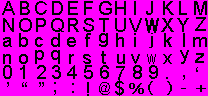
<style>
.page{position:relative;width:208px;height:96px;background:#ff00ff}
.page>*{position:absolute;margin:0}
.t1{font:18.7px "ArialMT";color:#000000}
.t2{font:18.7px "ArialMT";color:#000000;font-weight:bold;scale:0.75 1}
.t3{font:16.4px "ArialMT";color:#000000;scale:1.14 1}
.t4{font:18.7px "ArialMT";color:#000000;scale:0.75 1}
.t5{font:14px "ArialMT";color:#000000;scale:0.84 1}
.t6{font:14.9px "ArialMT";color:#000000;scale:1.25 1}
.t7{font:14.6px "ArialMT";color:#000000;scale:1.28 1}
</style>
<div class="page">
<p class="t1" style="left:2px;top:1px;width:13px;height:14px">A</p>
<p class="t1" style="left:20px;top:1px;width:10px;height:14px">B</p>
<p class="t1" style="left:35px;top:1px;width:12px;height:14px">C</p>
<p class="t1" style="left:52px;top:1px;width:11px;height:14px">D</p>
<p class="t1" style="left:68px;top:1px;width:10px;height:14px">E</p>
<p class="t1" style="left:84px;top:1px;width:9px;height:14px">F</p>
<p class="t1" style="left:99px;top:1px;width:13px;height:14px">G</p>
<p class="t1" style="left:115px;top:1px;width:11px;height:14px">H</p>
<p class="t1" style="left:146px;top:1px;width:7px;height:14px">J</p>
<p class="t1" style="left:163px;top:1px;width:11px;height:14px">K</p>
<p class="t1" style="left:179px;top:1px;width:8px;height:14px">L</p>
<p class="t1" style="left:194px;top:1px;width:13px;height:14px">M</p>
<p class="t1" style="left:195px;top:17px;width:11px;height:14px">Z</p>
<p class="t1" style="left:3px;top:18px;width:11px;height:14px">N</p>
<p class="t1" style="left:19px;top:18px;width:13px;height:14px">O</p>
<p class="t1" style="left:36px;top:18px;width:10px;height:14px">P</p>
<p class="t1" style="left:51px;top:18px;width:13px;height:14px">Q</p>
<p class="t1" style="left:68px;top:18px;width:11px;height:14px">R</p>
<p class="t1" style="left:83px;top:18px;width:11px;height:14px">S</p>
<p class="t1" style="left:99px;top:18px;width:10px;height:14px">T</p>
<p class="t1" style="left:115px;top:18px;width:11px;height:14px">U</p>
<p class="t1" style="left:129px;top:18px;width:13px;height:14px">V</p>
<p class="t2" style="left:145px;top:18px;width:14px;height:15px">W</p>
<p class="t1" style="left:161px;top:18px;width:13px;height:14px">X</p>
<p class="t1" style="left:177px;top:18px;width:12px;height:14px">Y</p>
<p class="t1" style="left:3px;top:37px;width:9px;height:10px">a</p>
<p class="t1" style="left:19px;top:33px;width:9px;height:14px">b</p>
<p class="t1" style="left:35px;top:37px;width:8px;height:10px">c</p>
<p class="t1" style="left:51px;top:33px;width:9px;height:14px">d</p>
<p class="t1" style="left:67px;top:37px;width:9px;height:10px">e</p>
<p class="t1" style="left:85px;top:33px;width:6px;height:14px">f</p>
<p class="t1" style="left:99px;top:33px;width:9px;height:14px">g</p>
<p class="t1" style="left:116px;top:33px;width:8px;height:14px">h</p>
<p class="t1" style="left:134px;top:33px;width:2px;height:14px">i</p>
<p class="t3" style="left:149px;top:33px;width:4px;height:15px">j</p>
<p class="t1" style="left:164px;top:33px;width:8px;height:14px">k</p>
<p class="t1" style="left:193px;top:37px;width:14px;height:10px">m</p>
<p class="t1" style="left:3px;top:54px;width:8px;height:10px">n</p>
<p class="t1" style="left:19px;top:54px;width:9px;height:10px">o</p>
<p class="t1" style="left:35px;top:50px;width:9px;height:14px">p</p>
<p class="t1" style="left:51px;top:50px;width:9px;height:14px">q</p>
<p class="t1" style="left:69px;top:54px;width:5px;height:10px">r</p>
<p class="t1" style="left:83px;top:54px;width:8px;height:10px">s</p>
<p class="t1" style="left:101px;top:51px;width:5px;height:13px">t</p>
<p class="t1" style="left:117px;top:54px;width:8px;height:10px">u</p>
<p class="t1" style="left:131px;top:54px;width:9px;height:10px">v</p>
<p class="t4" style="left:147px;top:54px;width:9px;height:10px">w</p>
<p class="t1" style="left:163px;top:54px;width:9px;height:10px">x</p>
<p class="t1" style="left:180px;top:50px;width:9px;height:14px">y</p>
<p class="t1" style="left:195px;top:53px;width:9px;height:10px">z</p>
<p class="t1" style="left:3px;top:65px;width:9px;height:14px">0</p>
<p class="t1" style="left:20px;top:65px;width:5px;height:14px">1</p>
<p class="t1" style="left:37px;top:65px;width:9px;height:14px">2</p>
<p class="t1" style="left:52px;top:65px;width:9px;height:14px">3</p>
<p class="t1" style="left:67px;top:65px;width:10px;height:14px">4</p>
<p class="t1" style="left:84px;top:65px;width:9px;height:14px">5</p>
<p class="t1" style="left:100px;top:65px;width:9px;height:14px">6</p>
<p class="t1" style="left:133px;top:65px;width:9px;height:14px">8</p>
<p class="t1" style="left:149px;top:65px;width:9px;height:14px">9</p>
<p class="t1" style="left:116px;top:66px;width:9px;height:14px">7</p>
<p class="t1" style="left:183px;top:75px;width:2px;height:5px">,</p>
<p class="t1" style="left:196px;top:67px;width:2px;height:5px">‘</p>
<p class="t1" style="left:7px;top:82px;width:2px;height:5px">’</p>
<p class="t1" style="left:22px;top:82px;width:22px;height:5px">“  ”</p>
<p class="t1" style="left:54px;top:82px;width:2px;height:13px">;</p>
<p class="t1" style="left:72px;top:83px;width:2px;height:10px">:</p>
<p class="t1" style="left:87px;top:82px;width:2px;height:14px">!</p>
<p class="t5" style="left:99px;top:82px;width:11px;height:13px">@</p>
<p class="t1" style="left:115px;top:80px;width:9px;height:17px">$</p>
<p class="t6" style="left:129px;top:83px;width:15px;height:11px">%</p>
<p class="t7" style="left:148px;top:81px;width:5px;height:14px">(</p>
<p class="t7" style="left:167px;top:81px;width:5px;height:14px">)</p>
<p class="t7" style="left:196px;top:85px;width:10px;height:7px">+</p>
</div>
